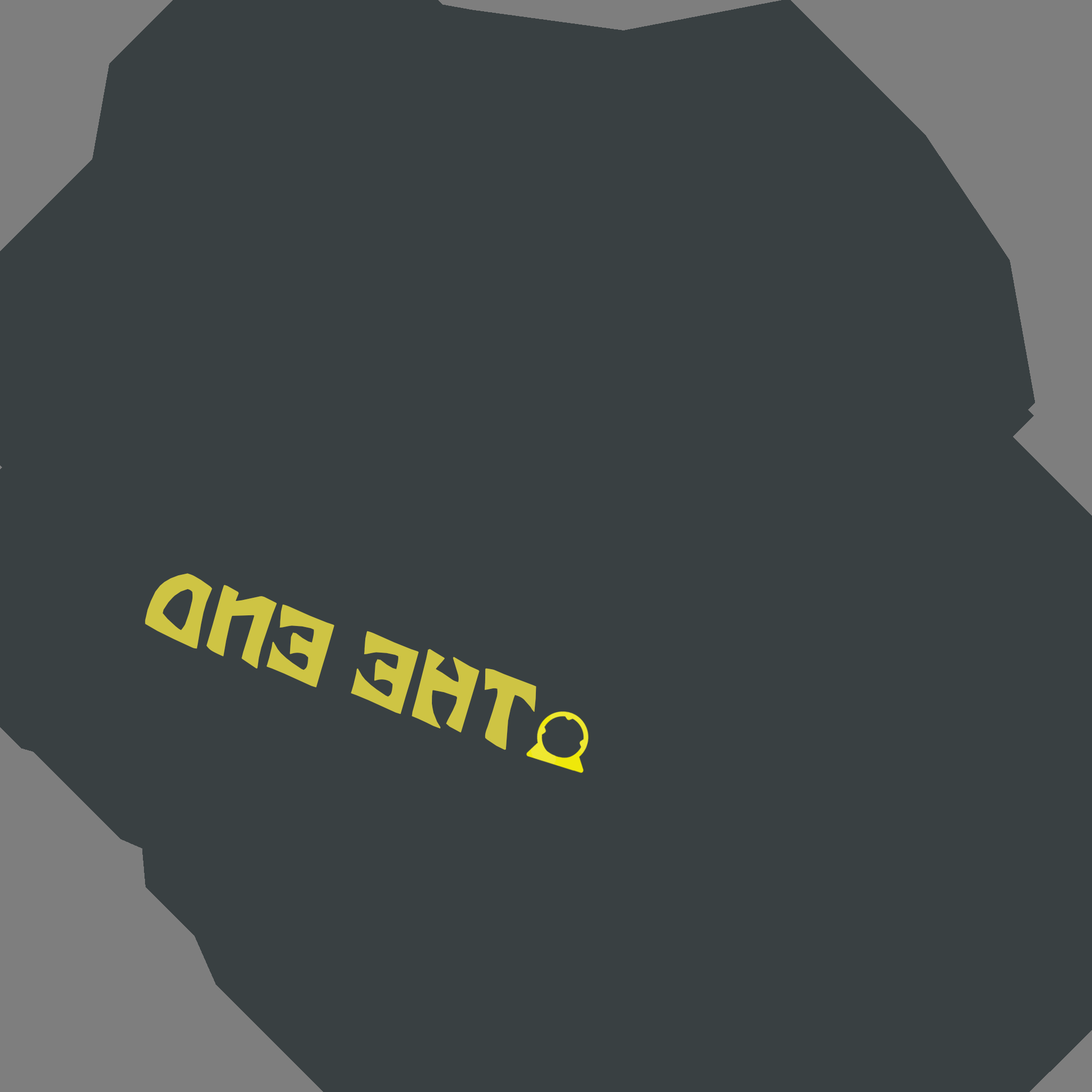
<style>
.page{position:relative;width:1092px;height:1092px;background:#394042}
.page>*{position:absolute;margin:0}
.t1{font:90.6px "Tarzan";color:#cec444}
</style>
<div class="page">
<p class="t1" style="left:145px;top:573px;width:391px;height:177px;rotate:-162deg">THE END</p>
</div>
